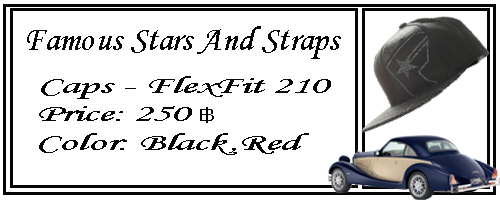
<style>
.page{position:relative;width:500px;height:200px;background:#ffffff}
.page>*{position:absolute;margin:0}
.t1{font:34.8px "MonotypeCorsiva";color:#070707}
.t2{font:24px "MonotypeCorsiva";color:#070707;scale:1.86 1}
.t3{font:24px "THKrub";color:#070707;scale:1.86 1}
</style>
<div class="page">
<p class="t1" style="left:27px;top:26px;width:314px;height:33px">Famous Stars And Straps</p>
<p class="t2" style="left:39px;top:76px;width:292px;height:79px">Caps - FlexFit 210<br>Price: 250 <span class="t3">฿</span><br>Color: Black,Red</p>
</div>
